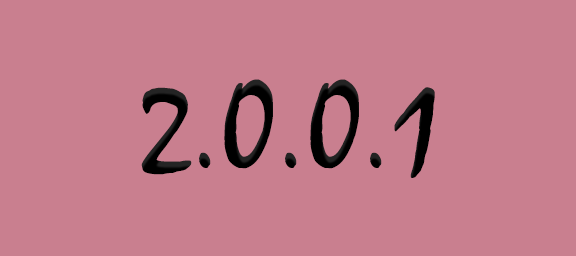
<style>
.page{position:relative;width:576px;height:256px;background:#c97f8f}
.page>*{position:absolute;margin:0}
.t1{font:128px "Mistral";color:#000000}
</style>
<div class="page">
<p class="t1" style="left:141px;top:79px;width:294px;height:99px">2.0.0.1</p>
</div>
